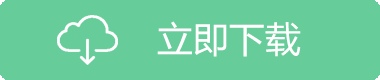
<style>
.page{position:relative;width:380px;height:80px;background:#66cc99}
.page>*{position:absolute;margin:0}
.t1{font:36px "MicrosoftYaHei";color:#ffffff}
</style>
<div class="page">
<p class="t1" style="left:157px;top:21px;width:144px;height:36px">立即下载</p>
</div>
